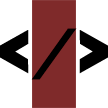
<style>
.page{position:relative;width:108px;height:108px;background:#ffffff}
.page>*{position:absolute;margin:0}
.t1{font:63.3px "LatinWide";color:#000000}
</style>
<div class="page">
<p class="t1" style="left:0px;top:28px;width:109px;height:52px">&lt;/&gt;</p>
</div>
